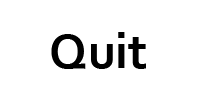
<style>
.page{position:relative;width:197px;height:100px;background:#ffffff}
.page>*{position:absolute;margin:0}
.t1{font:50.8px "Corbel-Bold";color:#000000}
</style>
<div class="page">
<p class="t1" style="left:51px;top:32px;width:95px;height:37px">Quit</p>
</div>
